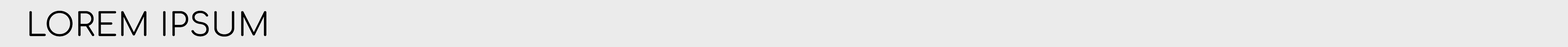
<style>
.page{position:relative;width:1568px;height:47px;background:#ebebeb}
.page>*{position:absolute;margin:0}
.t1{font:32.4px "Comfortaa-Regular";letter-spacing:0.01em;color:#000000;text-transform:uppercase;font-weight:bold}
</style>
<div class="page">
<p class="t1" style="left:29px;top:11px;width:237px;height:26px">Lorem Ipsum</p>
</div>
